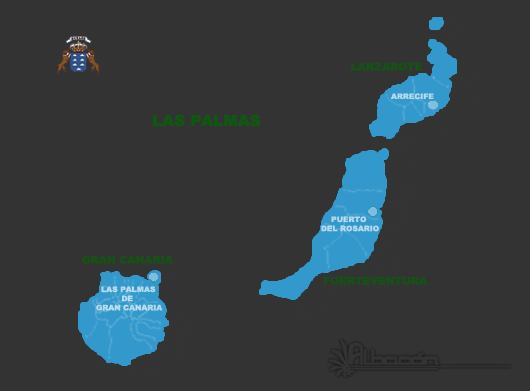
<style>
.page{position:relative;width:530px;height:391px;background:#333333}
.page>*{position:absolute;margin:0}
.t1{font:7.6px "Arial-Black";color:#b5daed}
.t2{font:15.3px "Arial-Black";color:#006600}
</style>
<div class="page">
<p class="t1" style="left:391px;top:93px;width:43px;height:7px">ARRECIFE</p>
<p class="t2" style="left:153px;top:114px;width:108px;height:13px">LAS PALMAS</p>
<p class="t1" style="left:321px;top:216px;width:58px;height:16px">PUERTO<br>DEL ROSARIO</p>
<p class="t1" style="left:96px;top:286px;width:67px;height:25px">LAS PALMAS<br>          DE<br>GRAN CANARIA</p>
</div>
